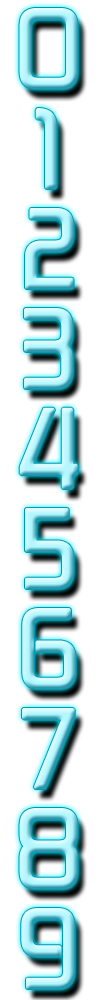
<style>
.page{position:relative;width:100px;height:1000px;background:#ffffff}
.page>*{position:absolute;margin:0}
.t1{font:107px "ZektonRg-Regular";font-weight:bold}
</style>
<div class="page">
<p class="t1" style="left:25px;top:208px;width:49px;height:81px">2</p>
<p class="t1" style="left:24px;top:308px;width:49px;height:81px">3</p>
<p class="t1" style="left:19px;top:407px;width:59px;height:82px">4</p>
<p class="t1" style="left:25px;top:508px;width:49px;height:81px">5</p>
<p class="t1" style="left:22px;top:608px;width:54px;height:81px">6</p>
<p class="t1" style="left:19px;top:808px;width:59px;height:81px">8</p>
<p class="t1" style="left:21px;top:908px;width:54px;height:81px">9</p>
</div>
